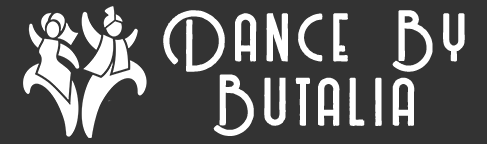
<style>
.page{position:relative;width:487px;height:144px;background:#333333}
.page>*{position:absolute;margin:0}
.t1{font:76.5px/64.3px "BillionaireMediumGrunge";letter-spacing:0.1em;color:#ffffff;font-weight:bold}
</style>
<div class="page">
<p class="t1" style="left:163px;top:10px;width:302px;height:126px;text-align:center">Dance By<br>Butalia</p>
</div>
